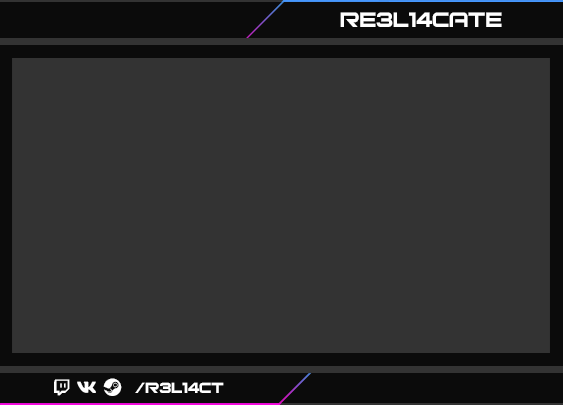
<style>
.page{position:relative;width:563px;height:405px;background:#333333}
.page>*{position:absolute;margin:0}
.t1{font:28px "Bitsumishi";color:#ffffff}
.t2{font:20px "Bitsumishi";color:#ffffff}
</style>
<div class="page">
<p class="t1" style="left:340px;top:12px;width:162px;height:15px">Re3l14cate</p>
<p class="t2" style="left:135px;top:382px;width:89px;height:11px">/R3l14ct</p>
</div>
